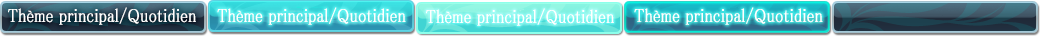
<style>
.page{position:relative;width:1040px;height:37px}
.page>*{position:absolute;margin:0}
.t1{font:19px "MS-PMincho";color:#ffffff;font-weight:bold;scale:0.84 1}
</style>
<div class="page">
<p class="t1" style="left:8px;top:7px;width:188px;height:18px">Thème principal/Quotidien</p>
<p class="t1" style="left:217px;top:7px;width:189px;height:18px">Thème principal/Quotidien</p>
<p class="t1" style="left:426px;top:8px;width:188px;height:18px">Thème principal/Quotidien</p>
<p class="t1" style="left:634px;top:7px;width:189px;height:18px">Thème principal/Quotidien</p>
</div>
